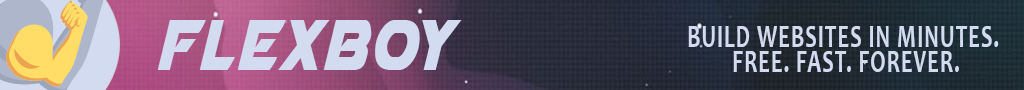
<style>
.page{position:relative;width:1024px;height:90px}
.page>*{position:absolute;margin:0}
.t1{font:94.2px "Airstrike";letter-spacing:0.04em;color:#d3dbf1;text-transform:uppercase;scale:0.67 1}
.t2{font:33.3px/25px "Candara-Bold";letter-spacing:0.04em;color:#d3dbf1;text-transform:uppercase;scale:0.67 1}
</style>
<div class="page">
<p class="t1" style="left:157px;top:20px;width:305px;height:50px">Flexboy</p>
<p class="t2" style="left:688px;top:26px;width:311px;height:46px;text-align:center">Build Websites in Minutes. <br>Free. Fast. Forever.</p>
</div>
